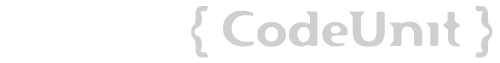
<style>
.page{position:relative;width:500px;height:63px;background:#ffffff}
.page>*{position:absolute;margin:0}
.t1{font:48px "Flexure";color:#bcbbbb}
</style>
<div class="page">
<p class="t1" style="left:191px;top:6px;width:302px;height:52px;opacity:0.7">{ CodeUnit }</p>
</div>
